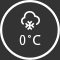
<style>
.page{position:relative;width:60px;height:60px;background:#333333}
.page>*{position:absolute;margin:0}
.t1{font:14px "MyriadPro-Regular";letter-spacing:0.1em;color:#ffffff}
.t2{font:14px "Interstate-LightCondensed";letter-spacing:0.1em;color:#ffffff}
</style>
<div class="page">
<p class="t1" style="left:19px;top:35px;width:22px;height:10px"><span class="t2">0</span>˚C</p>
</div>
